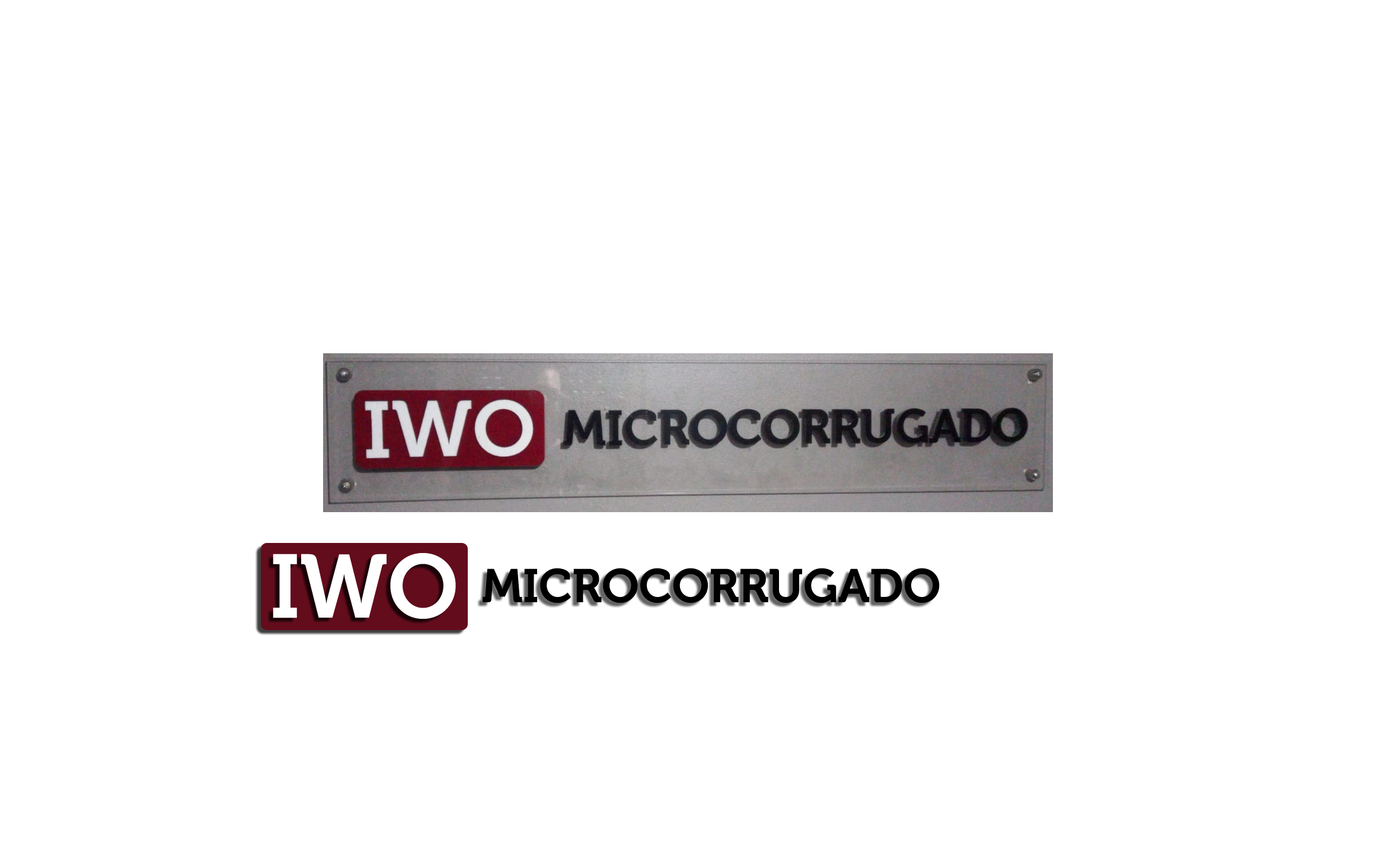
<style>
.page{position:relative;width:1376px;height:866px;background:#ffffff}
.page>*{position:absolute;margin:0}
.t1{font:88.9px "Museo-700";color:#ffffff}
.t2{font:46.9px "Museo-700";color:#000000}
</style>
<div class="page">
<p class="t1" style="left:273px;top:553px;width:183px;height:66px">IWO</p>
<p class="t2" style="left:483px;top:568px;width:457px;height:35px">MICROCORRUGADO</p>
</div>
